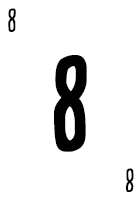
<style>
.page{position:relative;width:140px;height:200px;background:#ffffff}
.page>*{position:absolute;margin:0}
.t1{font:28.7px "CardenioModern-Reg";letter-spacing:-0.1em;color:#000000;text-transform:uppercase;font-weight:bold;scale:0.87 1}
.t2{font:115px "CardenioModern-Bold";letter-spacing:-0.1em;color:#000000;text-transform:uppercase;font-weight:bold;scale:0.87 1}
</style>
<div class="page">
<p class="t1" style="left:8px;top:8px;width:8px;height:25px">8</p>
<p class="t2" style="left:54px;top:55px;width:33px;height:97px">8</p>
<p class="t1" style="left:125px;top:168px;width:9px;height:25px;rotate:180deg">8</p>
</div>
